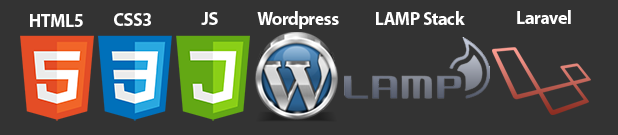
<style>
.page{position:relative;width:618px;height:135px;background:#333333}
.page>*{position:absolute;margin:0}
.t1{font:18.7px "MyriadPro-Bold";letter-spacing:-0.025em;color:#ffffff;scale:0.96 1}
</style>
<div class="page">
<p class="t1" style="left:30px;top:14px;width:53px;height:13px">HTML5</p>
<p class="t1" style="left:114px;top:13px;width:37px;height:13px">CSS3</p>
<p class="t1" style="left:201px;top:12px;width:17px;height:13px">JS</p>
<p class="t1" style="left:257px;top:11px;width:82px;height:18px">Wordpress</p>
<p class="t1" style="left:376px;top:11px;width:89px;height:14px">LAMP Stack</p>
<p class="t1" style="left:517px;top:10px;width:54px;height:14px">Laravel</p>
</div>
